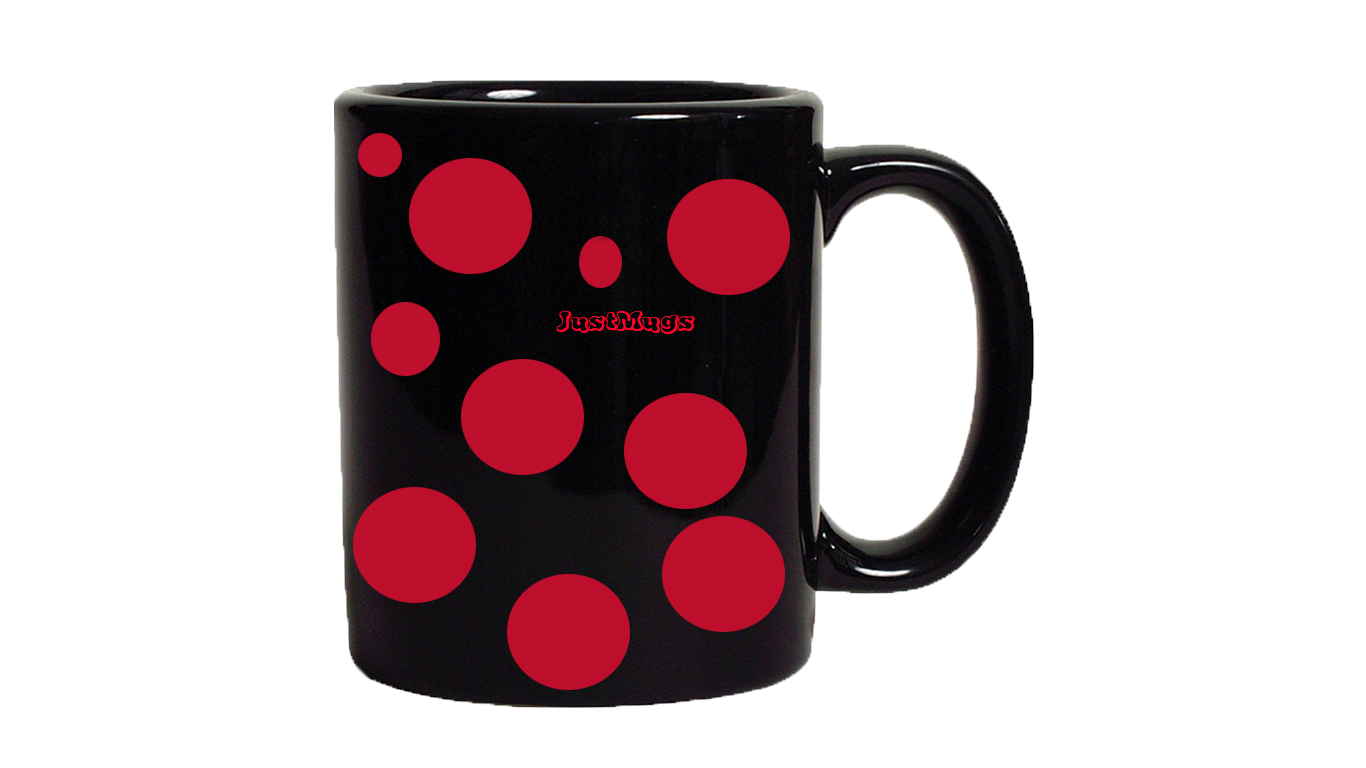
<style>
.page{position:relative;width:1366px;height:768px;background:#ffffff}
.page>*{position:absolute;margin:0}
.t1{font:24px "CandyPop!";color:#ff002a}
</style>
<div class="page">
<p class="t1" style="left:556px;top:311px;width:139px;height:23px">JustMugs</p>
</div>
